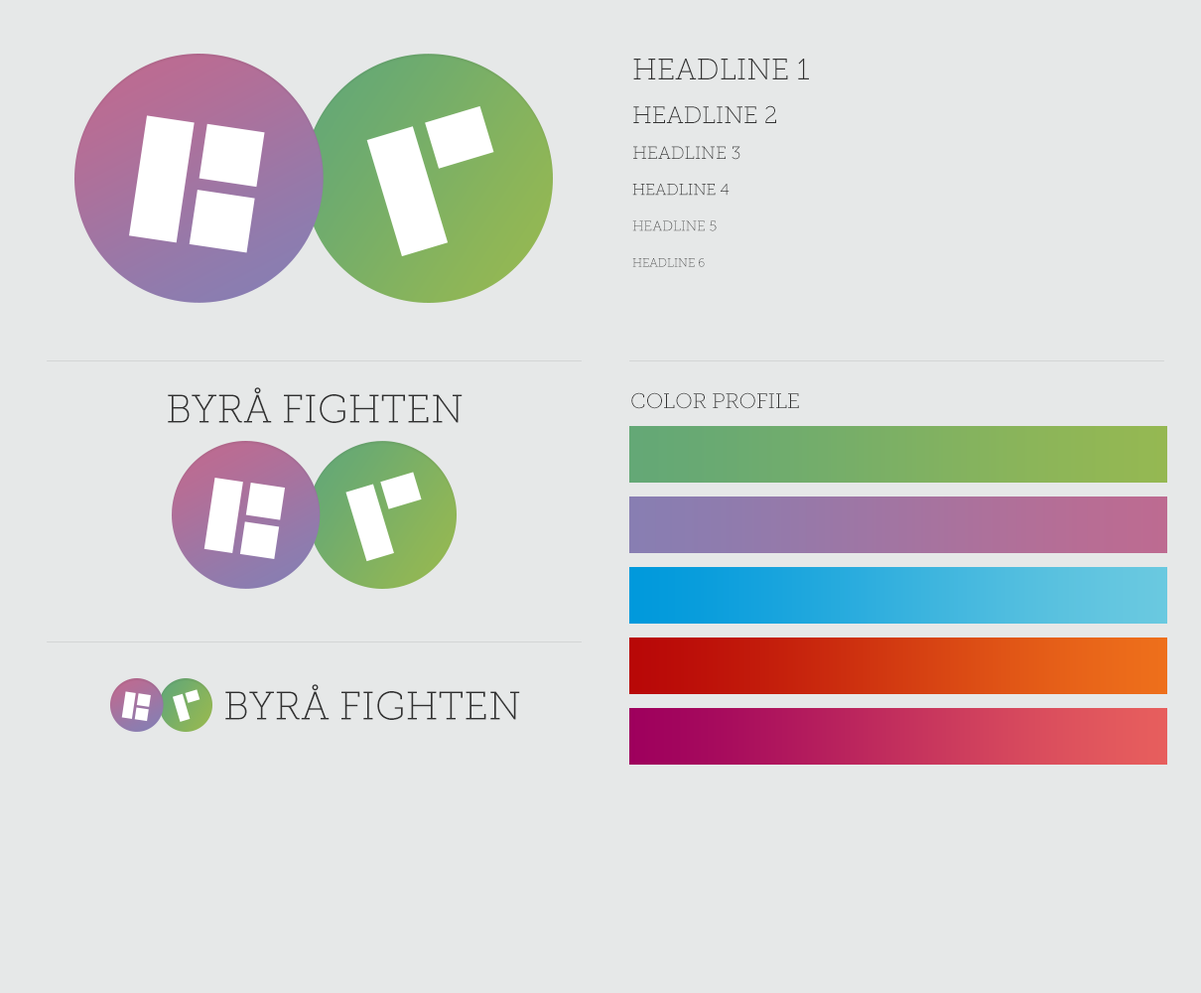
<style>
.page{position:relative;width:1201px;height:993px;background:#e6e8e8}
.page>*{position:absolute;margin:0}
.t1{font:29.8px/39.8px "MuseoSlab-100";color:#333333}
.t2{font:23.8px/43.7px "MuseoSlab-100";color:#333333}
.t3{font:17.9px/35.9px "MuseoSlab-100";color:#333333}
.t4{font:15.9px/35.9px "MuseoSlab-100";color:#333333}
.t5{font:13.9px/35.9px "MuseoSlab-100";color:#333333}
.t6{font:11.9px/35.9px "MuseoSlab-100";color:#333333}
.t7{font:39.7px "MuseoSlab-100";color:#333333}
.t8{font:21px "MuseoSlab-100";color:#333333}
</style>
<div class="page">
<p class="t1" style="left:632px;top:59px;width:177px;height:208px">HEADLINE 1<br><span class="t2">HEADLINE 2<br></span><span class="t3">HEADLINE 3<br></span><span class="t4">HEADLINE 4<br></span><span class="t5">HEADLINE 5<br></span><span class="t6">HEADLINE 6</span></p>
<p class="t7" style="left:168px;top:387px;width:295px;height:36px">BYRÅ FIGHTEN</p>
<p class="t8" style="left:631px;top:392px;width:168px;height:17px">COLOR PROFILE</p>
<p class="t7" style="left:225px;top:684px;width:295px;height:36px">BYRÅ FIGHTEN</p>
</div>
